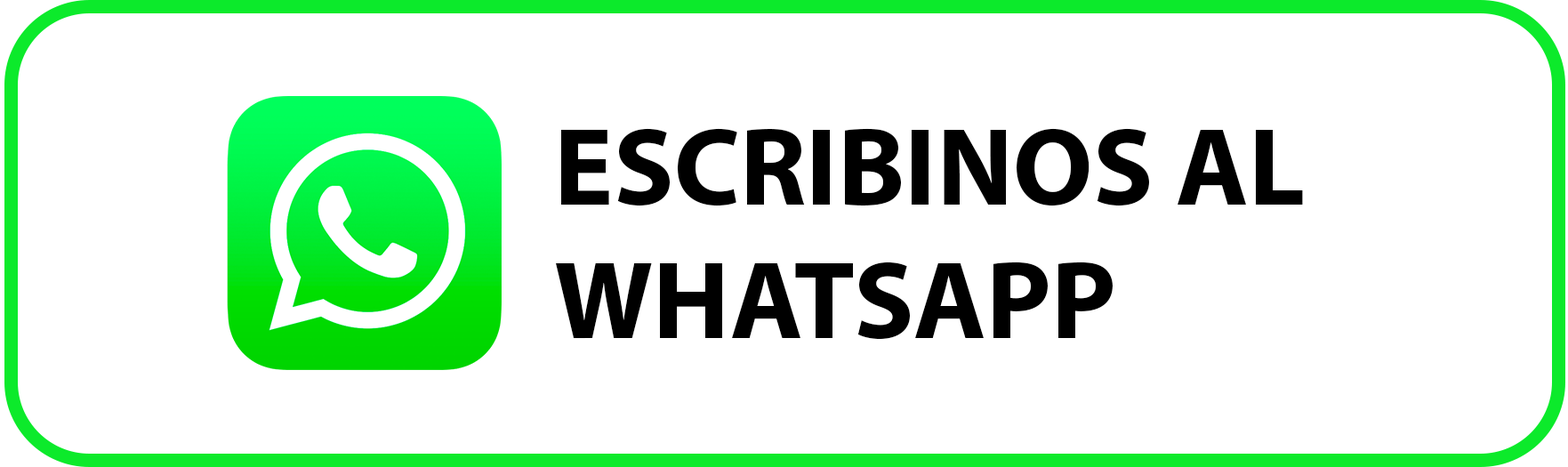
<style>
.page{position:relative;width:1568px;height:467px;background:#ffffff}
.page>*{position:absolute;margin:0}
.t1{font:111.2px "MyriadPro-Bold";color:#000000}
</style>
<div class="page">
<p class="t1" style="left:556px;top:128px;width:747px;height:212px">ESCRIBINOS AL WHATSAPP</p>
</div>
